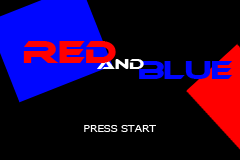
<style>
.page{position:relative;width:240px;height:160px;background:#000000}
.page>*{position:absolute;margin:0}
.t1{font:30px "Ethnocentric";color:#ff0000;text-transform:uppercase;scale:1.07 1}
.t2{font:14px "Ethnocentric";color:#ffffff;text-transform:uppercase;scale:1.07 1}
.t3{font:24px "Ethnocentric";color:#0006ff;text-transform:uppercase;scale:1.07 1}
.t4{font:10px "Meiryo";color:#ffffff;text-transform:uppercase;scale:1.07 1}
</style>
<div class="page">
<p class="t1" style="left:23px;top:41px;width:93px;height:22px">RED</p>
<p class="t2" style="left:97px;top:59px;width:47px;height:10px">and</p>
<p class="t3" style="left:139px;top:61px;width:93px;height:18px">blue</p>
<p class="t4" style="left:84px;top:125px;width:72px;height:7px">press start</p>
</div>
